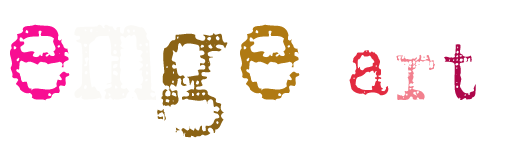
<style>
.page{position:relative;width:529px;height:150px;background:#ffffff}
.page>*{position:absolute;margin:0}
.t1{font:150px "Harting-Plain";letter-spacing:-0.025em;color:#f80e92;scale:0.88 1}
.t2{font:150px "Harting-Plain";letter-spacing:-0.025em;color:#faf9f6;scale:0.88 1}
.t3{font:150px "Harting-Plain";letter-spacing:-0.025em;color:#8b6315;scale:0.88 1}
.t4{font:150px "Harting-Plain";letter-spacing:-0.025em;color:#b07a13;scale:0.88 1}
.t5{font:90px "Harting-Plain";letter-spacing:-0.025em;color:#e22b40;scale:0.88 1}
.t6{font:90px "Harting-Plain";letter-spacing:-0.025em;color:#f2808e;scale:0.88 1}
.t7{font:90px "Harting-Plain";letter-spacing:-0.025em;color:#ae074a;scale:0.88 1}
</style>
<div class="page">
<p class="t1" style="left:10px;top:24px;width:466px;height:114px">e<span class="t2">m</span><span class="t3">g</span><span class="t4">e </span><span class="t5">a</span><span class="t6">r</span><span class="t7">t</span></p>
</div>
